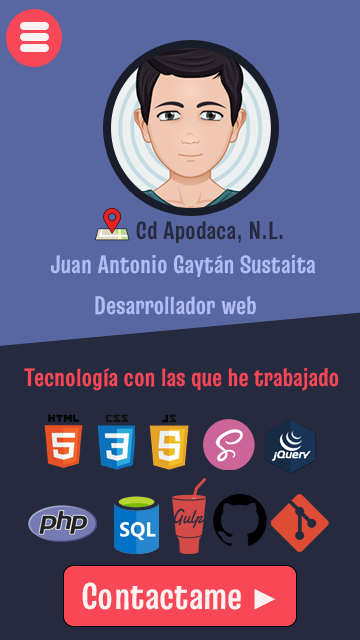
<style>
.page{position:relative;width:360px;height:640px;background:#5867a1}
.page>*{position:absolute;margin:0}
.t1{font:25px "TruculentaRoman-Bold";color:#252a3e}
.t2{font:25px "TruculentaRoman-Bold";color:#b1bef6}
.t3{font:25px "TruculentaRoman-Bold";color:#f84756}
.t4{font:37.5px "TruculentaRoman-Bold";color:#fef1f1}
.t5{font:29.2px "ArialMT";color:#fef1f1}
</style>
<div class="page">
<p class="t1" style="left:136px;top:220px;width:147px;height:24px">Cd Apodaca, N.L.</p>
<p class="t2" style="left:50px;top:254px;width:266px;height:24px">Juan Antonio Gaytán Sustaita</p>
<p class="t2" style="left:95px;top:296px;width:161px;height:19px">Desarrollador web</p>
<p class="t3" style="left:24px;top:367px;width:315px;height:24px">Tecnología con las que he trabajado</p>
<p class="t4" style="left:82px;top:582px;width:193px;height:28px">Contactame <span class="t5">►</span></p>
</div>
